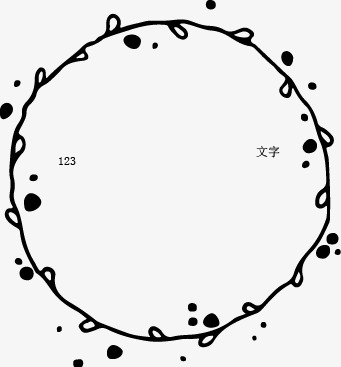
<style>
.page{position:relative;width:341px;height:367px;background:#f6f6f6}
.page>*{position:absolute;margin:0}
.t1{font:12px "SimSun"}
.t2{font:12px "SimSun";color:#000000}
</style>
<div class="page">
<p class="t1" style="left:256px;top:146px;width:24px;height:12px">文字</p>
<p class="t2" style="left:59px;top:157px;width:17px;height:8px">123</p>
</div>
